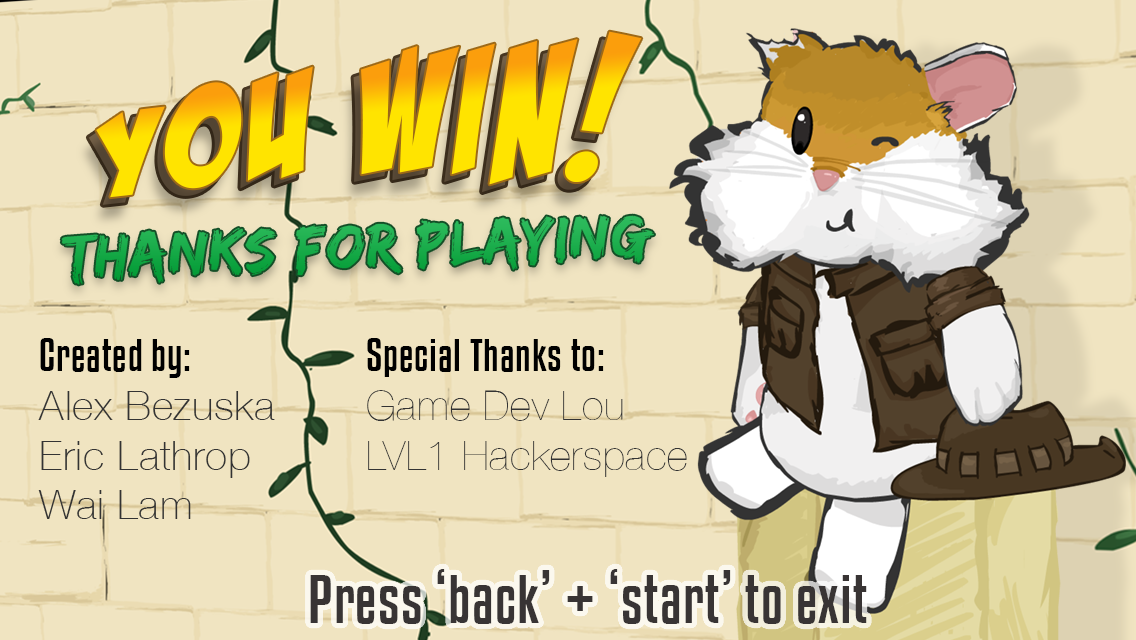
<style>
.page{position:relative;width:1136px;height:640px;background:#f0e4c1}
.page>*{position:absolute;margin:0}
.t1{font:156.4px "BadaBoomBB";letter-spacing:0.06em;scale:0.91 1}
.t2{font:63.4px "EdoSZ";letter-spacing:0.02em;color:#1aac4b}
.t3{font:40.9px "HelveticaNeue-Thin";letter-spacing:0.02em;color:#333333}
.t4{font:40.9px "KenyanCoffeeRg-Regular";letter-spacing:0.02em;color:#000000}
.t5{font:41px "HelveticaNeue-UltraLight";letter-spacing:0.02em;color:#333333}
.t6{font:41px "KenyanCoffeeRg-Regular";letter-spacing:0.02em;color:#000000}
.t7{font:60.9px "KenyanCoffeeRg-Regular";letter-spacing:0.02em;color:#383434}
</style>
<div class="page">
<p class="t1" style="left:88px;top:39px;width:546px;height:166px;rotate:-5deg">you win!</p>
<p class="t1" style="left:96px;top:31px;width:546px;height:167px;rotate:-5deg">You win!</p>
<p class="t2" style="left:61px;top:215px;width:593px;height:70px;rotate:-2deg">Thanks for playing</p>
<p class="t3" style="left:38px;top:338px;width:237px;height:181px"><span class="t4">Created by:<br></span>Alex Bezuska<br>Eric Lathrop<br>Wai Lam</p>
<p class="t5" style="left:367px;top:338px;width:320px;height:139px"><span class="t6">Special Thanks to:<br></span>Game Dev Lou<br>LVL1 Hackerspace</p>
<p class="t7" style="left:310px;top:569px;width:557px;height:55px">Press ‘back’ + ‘start’ to exit</p>
</div>
